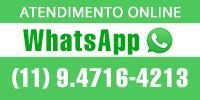
<style>
.page{position:relative;width:200px;height:100px;background:#4dc85b}
.page>*{position:absolute;margin:0}
.t1{font:14.1px "OpenSans";color:#ffffff;text-transform:uppercase;font-weight:bold}
.t2{font:30.2px "HelveticaLTStd-Comp";letter-spacing:0.04em;color:#00a614}
.t3{font:26px "HelveticaLTStd-Comp";letter-spacing:0.04em;color:#ffffff}
.t4{font:26px "HelveticaLTStd-Comp";letter-spacing:-0.02em;color:#ffffff}
</style>
<div class="page">
<p class="t1" style="left:19px;top:6px;width:162px;height:12px">Atendimento Online</p>
<p class="t2" style="left:23px;top:29px;width:117px;height:26px">WhatsApp</p>
<p class="t3" style="left:12px;top:68px;width:176px;height:21px"><span class="t4">(11)</span> 9.4716-4213</p>
</div>
